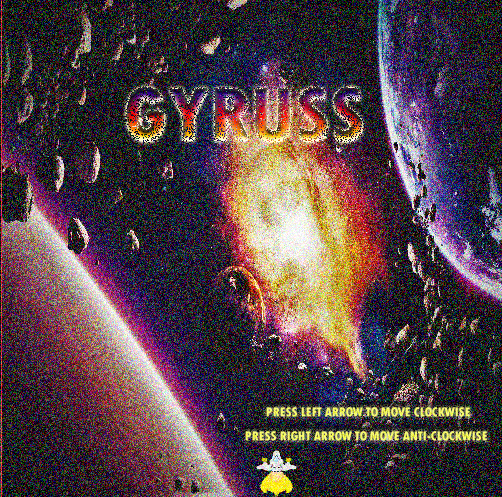
<style>
.page{position:relative;width:502px;height:497px}
.page>*{position:absolute;margin:0}
.t1{font:13.3px "TwCenMT-CondensedExtraBold";text-transform:uppercase}
</style>
<div class="page">
<p class="t1" style="left:266px;top:407px;width:204px;height:10px">Press LeFT Arrow to move clockwise</p>
<p class="t1" style="left:245px;top:431px;width:242px;height:10px">Press Right Arrow to move anti-clockwise</p>
</div>
